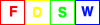
<style>
.page{position:relative;width:100px;height:25px;background:#ffffff}
.page>*{position:absolute;margin:0}
.t1{font:13.3px "H2gtrE";color:#ffff00}
.t2{font:13.3px "H2gtrE";color:#00ff00}
.t3{font:12.5px "H2gtrE";color:#0011ff}
</style>
<div class="page">
<p class="t1" style="left:33px;top:6px;width:9px;height:12px">D</p>
<p class="t2" style="left:58px;top:6px;width:9px;height:12px">S</p>
<p class="t3" style="left:81px;top:6px;width:13px;height:11px">W</p>
</div>
